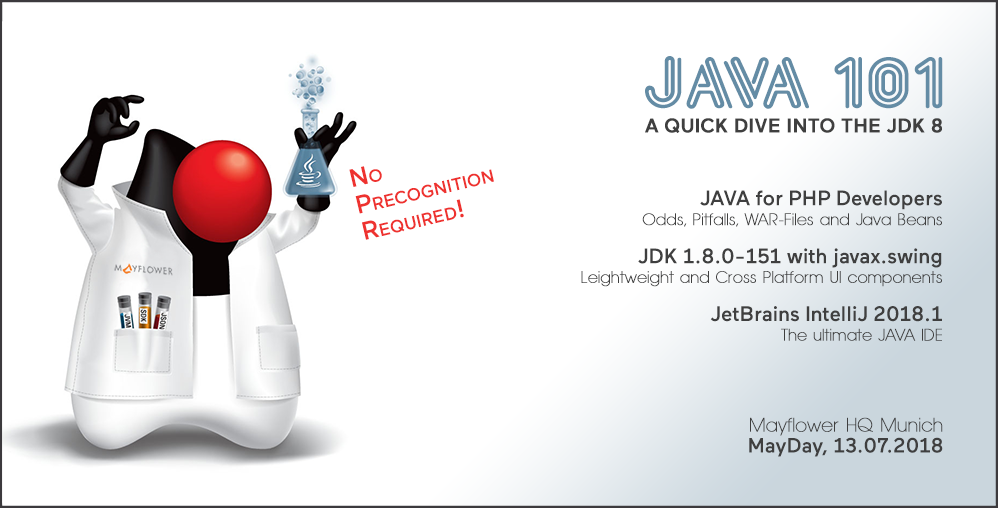
<style>
.page{position:relative;width:998px;height:508px;background:#ffffff}
.page>*{position:absolute;margin:0}
.t1{font:63.4px "EklekticPlain";color:#648ca5;font-variant:small-caps}
.t2{font:19.7px "Maax-Medium";color:#3f3f3f;font-weight:bold}
.t3{font:25.5px/27.1px "Maax-Medium";color:#ee322f;font-variant:small-caps}
.t4{font:16.4px "AvantageSmallNormal";color:#3f3f3f;font-weight:bold}
.t5{font:20.9px "Maax-Medium";color:#3f3f3f}
.t6{font:19.3px "AvantageSmallNormal";color:#3f3f3f;font-weight:bold}
.t7{font:20.8px/21px "Maax-Medium";color:#3f3f3f}
</style>
<div class="page">
<p class="t1" style="left:645px;top:56px;width:298px;height:53px">JAVA 101</p>
<p class="t2" style="left:645px;top:118px;width:297px;height:15px">A QUICK DIVE INTO THE JDK 8</p>
<p class="t3" style="left:349px;top:166px;width:145px;height:74px;rotate:-13deg">No<br>Precognition<br>Required!</p>
<p class="t4" style="left:581px;top:190px;width:361px;height:151px;text-align:right"><span class="t5">JAVA for PHP Developers<br></span>Odds, Pitfalls, WAR-Files and Java Beans<br><br><span class="t5">JDK 1.8.0-151 with javax.swing<br></span>Leightweight and Cross Platform UI components<br><br><span class="t5">JetBrains IntelliJ 2018.1<br></span>The ultimate JAVA IDE</p>
<p class="t6" style="left:749px;top:417px;width:194px;height:40px;text-align:right">Mayflower HQ Munich<br><span class="t7">MayDay, 13.07.2018</span></p>
</div>
